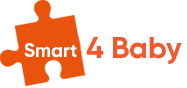
<style>
.page{position:relative;width:187px;height:88px;background:#ffffff}
.page>*{position:absolute;margin:0}
.t1{font:30px "SVN-GilroyBold";color:#f1582c}
.t2{font:19px "SVN-GilroyBold";color:#fefefe}
</style>
<div class="page">
<p class="t1" style="left:86px;top:37px;width:96px;height:27px">4 Baby</p>
<p class="t2" style="left:24px;top:43px;width:53px;height:15px">Smart</p>
</div>
